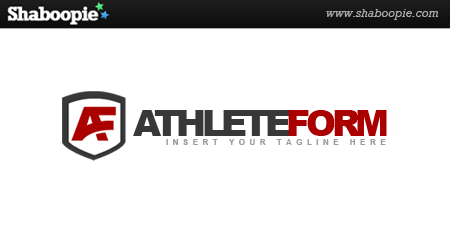
<style>
.page{position:relative;width:450px;height:250px;background:#ffffff}
.page>*{position:absolute;margin:0}
.t1{font:36px "Arial-Black";letter-spacing:-0.12em;color:#383838}
.t2{font:36px "Arial-Black";letter-spacing:-0.12em;color:#ab0000}
.t3{font:8px "Arial-BoldMT";letter-spacing:0.56em;color:#9b9b9b;text-transform:uppercase}
</style>
<div class="page">
<p class="t1" style="left:133px;top:110px;width:254px;height:26px">ATHLETE<span class="t2">FORM</span></p>
<p class="t3" style="left:166px;top:139px;width:220px;height:6px">INSERT YOUR TAGLINE HERE</p>
</div>
